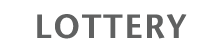
<style>
.page{position:relative;width:220px;height:50px;background:#ffffff}
.page>*{position:absolute;margin:0}
.t1{font:33.3px "StoneSansSemITCTTSemi";letter-spacing:0.06em;color:#606161;text-transform:uppercase}
</style>
<div class="page">
<p class="t1" style="left:37px;top:14px;width:150px;height:25px">LOTTERY</p>
</div>
